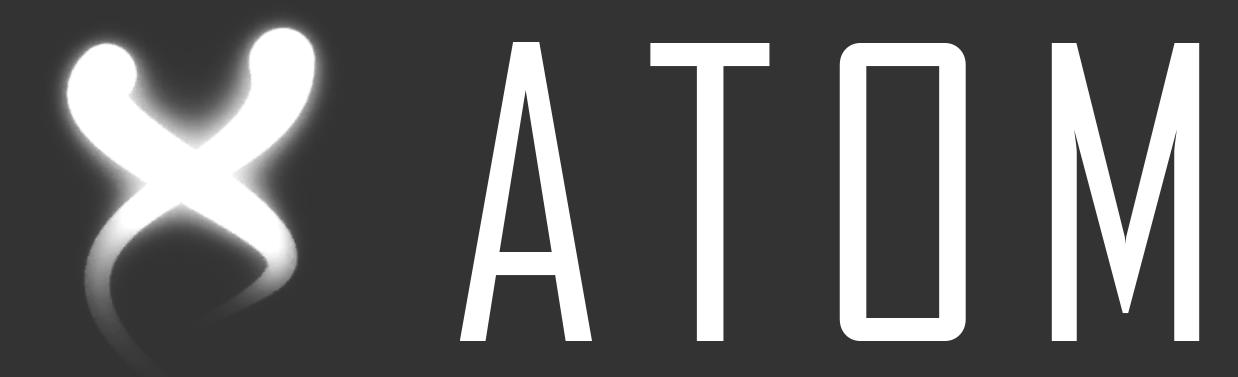
<style>
.page{position:relative;width:1238px;height:377px;background:#333333}
.page>*{position:absolute;margin:0}
.t1{font:390px "AgencyFB-Reg";color:#ffffff}
</style>
<div class="page">
<p class="t1" style="left:460px;top:42px;width:740px;height:299px">A T O M</p>
</div>
